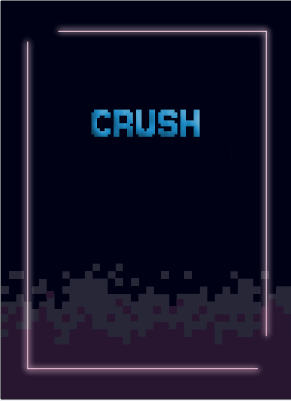
<style>
.page{position:relative;width:291px;height:401px;background:#000115}
.page>*{position:absolute;margin:0}
.t1{font:50px "Jersey10-Regular";letter-spacing:0.025em}
</style>
<div class="page">
<p class="t1" style="left:91px;top:109px;width:109px;height:28px">CRUSH</p>
</div>
